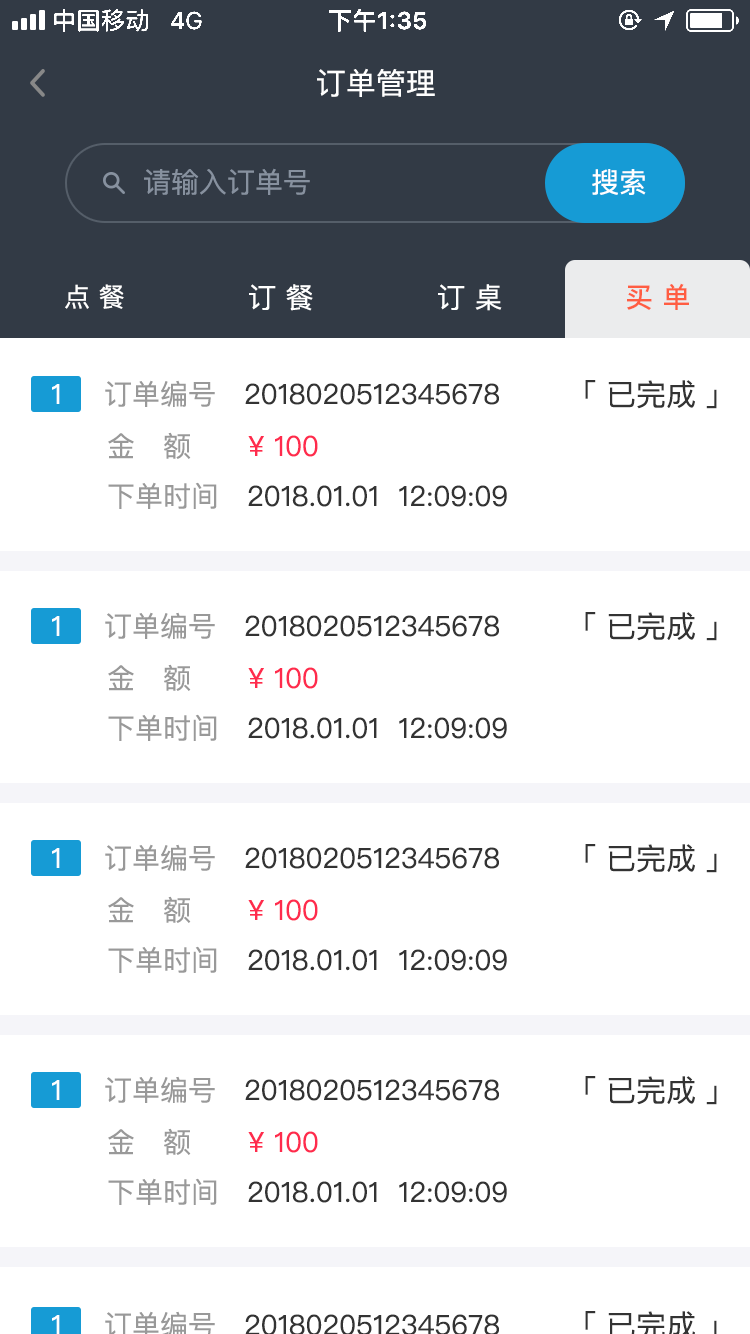
<style>
.page{position:relative;width:750px;height:1334px;background:#ffffff}
.page>*{position:absolute;margin:0}
.t1{font:30px "PingFangSC-Regular";color:#ffffff}
.t2{font:28px "PingFangSC-Regular";color:#87919f}
.t3{font:28px "PingFangSC-Regular";color:#ffffff}
.t4{font:26px "PingFangSC-Regular";color:#ffffff}
.t5{font:28px "PingFangSC-Medium";color:#ff5d42}
.t6{font:28px "PingFangSC-Regular";color:#333333}
.t7{font:28px "PingFangSC-Regular";color:#999999}
.t8{font:30px "PingFangSC-Regular";color:#333333}
.t9{font:28px/50px "PingFangSC-Regular";color:#999999}
.t10{font:28px/50px "PingFangSC-Regular";color:#ff2b4d}
</style>
<div class="page">
<p class="t1" style="left:317px;top:68px;width:118px;height:29px">订单管理</p>
<p class="t2" style="left:144px;top:168px;width:166px;height:27px">请输入订单号</p>
<p class="t3" style="left:592px;top:169px;width:54px;height:26px">搜索</p>
<p class="t4" style="left:65px;top:284px;width:59px;height:25px">点 餐</p>
<p class="t3" style="left:249px;top:284px;width:64px;height:27px">订 餐</p>
<p class="t3" style="left:438px;top:284px;width:64px;height:27px">订 桌</p>
<p class="t5" style="left:627px;top:283px;width:62px;height:27px">买 单</p>
<p class="t3" style="left:52px;top:384px;width:8px;height:20px">1</p>
<p class="t6" style="left:105px;top:380px;width:394px;height:27px"><span class="t7">订单编号   </span>2018020512345678</p>
<p class="t8" style="left:585px;top:380px;width:132px;height:29px">「 已完成 」</p>
<p class="t6" style="left:108px;top:432px;width:399px;height:77px"><span class="t9">金   额       </span><span class="t10">¥ 100<br></span><span class="t7">下单时间   </span>2018.01.01  12:09:09</p>
<p class="t3" style="left:52px;top:616px;width:8px;height:20px">1</p>
<p class="t6" style="left:105px;top:612px;width:394px;height:27px"><span class="t7">订单编号   </span>2018020512345678</p>
<p class="t8" style="left:585px;top:612px;width:132px;height:29px">「 已完成 」</p>
<p class="t6" style="left:108px;top:664px;width:399px;height:77px"><span class="t9">金   额       </span><span class="t10">¥ 100<br></span><span class="t7">下单时间   </span>2018.01.01  12:09:09</p>
<p class="t6" style="left:105px;top:844px;width:394px;height:27px"><span class="t7">订单编号   </span>2018020512345678</p>
<p class="t8" style="left:585px;top:844px;width:132px;height:29px">「 已完成 」</p>
<p class="t3" style="left:52px;top:848px;width:8px;height:20px">1</p>
<p class="t6" style="left:108px;top:896px;width:399px;height:77px"><span class="t9">金   额       </span><span class="t10">¥ 100<br></span><span class="t7">下单时间   </span>2018.01.01  12:09:09</p>
<p class="t3" style="left:52px;top:1080px;width:8px;height:20px">1</p>
<p class="t6" style="left:105px;top:1076px;width:394px;height:27px"><span class="t7">订单编号   </span>2018020512345678</p>
<p class="t8" style="left:585px;top:1076px;width:132px;height:29px">「 已完成 」</p>
<p class="t6" style="left:108px;top:1128px;width:399px;height:77px"><span class="t9">金   额       </span><span class="t10">¥ 100<br></span><span class="t7">下单时间   </span>2018.01.01  12:09:09</p>
<p class="t3" style="left:52px;top:1315px;width:8px;height:20px">1</p>
</div>
